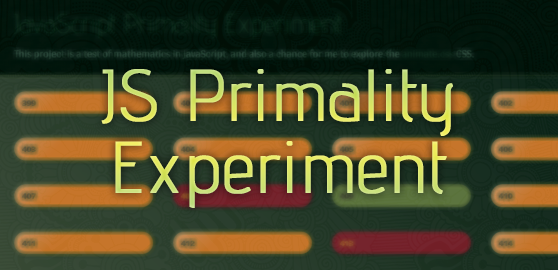
<style>
.page{position:relative;width:558px;height:270px}
.page>*{position:absolute;margin:0}
.t1{font:72px/70px "AdventPro-Light";letter-spacing:0.015em;color:#d8e66f;font-weight:bold}
.t2{font:72px/72px "AdventPro-Light";letter-spacing:0.015em;color:#d8e66f;font-weight:bold}
</style>
<div class="page">
<p class="t1" style="left:101px;top:69px;width:352px;height:139px;text-align:center">JS Primality <span class="t2">Experiment</span></p>
</div>
